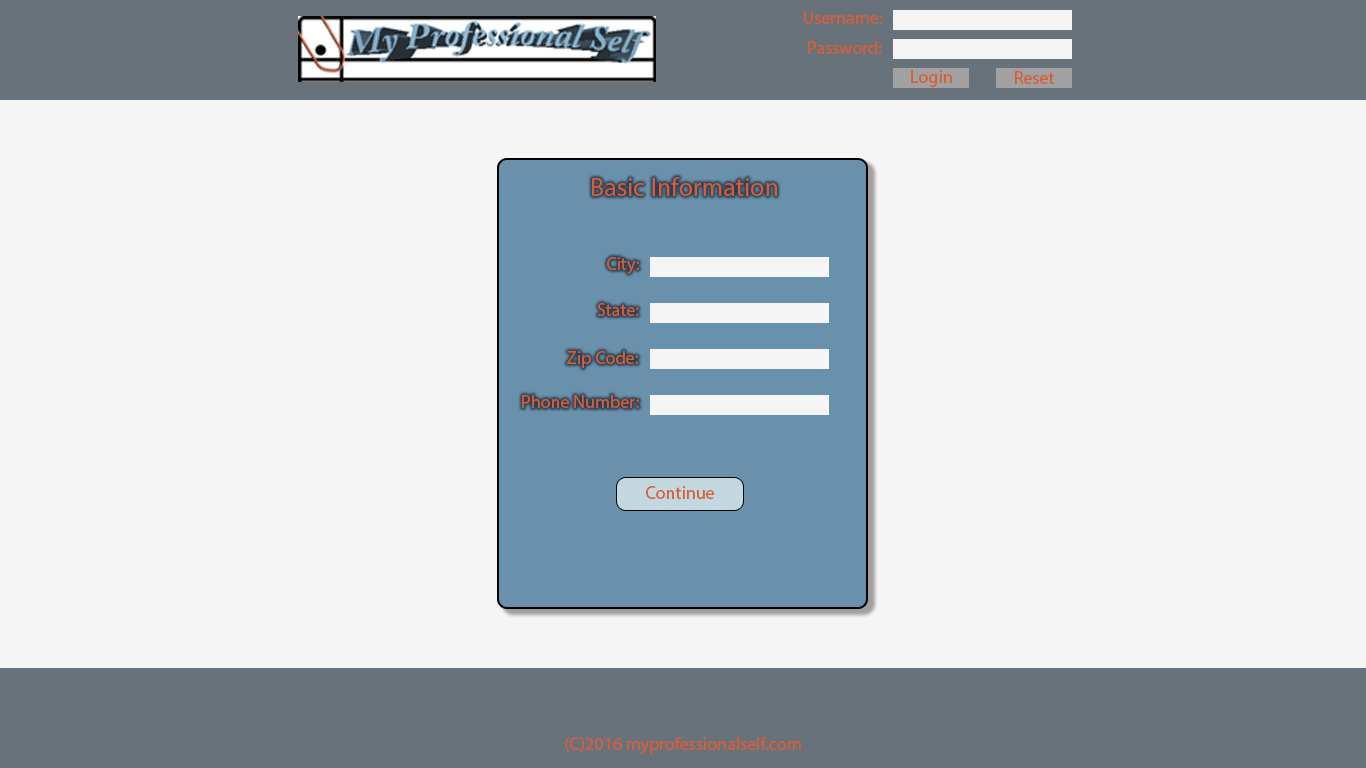
<style>
.page{position:relative;width:1366px;height:768px;background:#f5f5f5}
.page>*{position:absolute;margin:0}
.t1{font:18px "MyriadPro-Regular";color:#d75c37}
.t2{font:26px "MyriadPro-Regular";color:#d75c37}
</style>
<div class="page">
<p class="t1" style="left:804px;top:11px;width:78px;height:13px">Username:</p>
<p class="t1" style="left:808px;top:41px;width:74px;height:13px">Password:</p>
<p class="t1" style="left:911px;top:70px;width:41px;height:17px">Login</p>
<p class="t1" style="left:1015px;top:71px;width:40px;height:13px">Reset</p>
<p class="t2" style="left:592px;top:177px;width:185px;height:19px">Basic Information</p>
<p class="t1" style="left:607px;top:257px;width:32px;height:17px">City:</p>
<p class="t1" style="left:597px;top:303px;width:42px;height:13px">State:</p>
<p class="t1" style="left:567px;top:351px;width:71px;height:17px">Zip Code:</p>
<p class="t1" style="left:522px;top:395px;width:117px;height:13px">Phone Number:</p>
<p class="t1" style="left:646px;top:486px;width:68px;height:13px">Continue</p>
<p class="t1" style="left:565px;top:737px;width:236px;height:17px">(C)2016 myprofessionalself.com</p>
</div>
